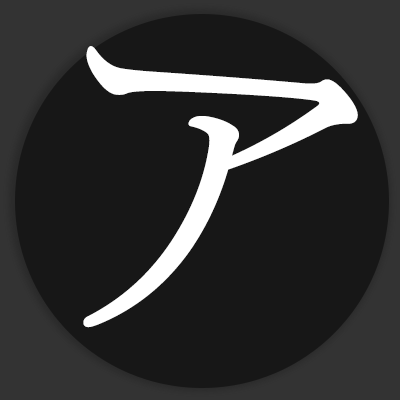
<style>
.page{position:relative;width:400px;height:400px;background:#171717}
.page>*{position:absolute;margin:0}
.t1{font:385.5px "YuMincho-Regular";letter-spacing:-0.055em;color:#ffffff}
</style>
<div class="page">
<p class="t1" style="left:83px;top:46px;width:275px;height:282px;rotate:9deg">ア</p>
</div>
